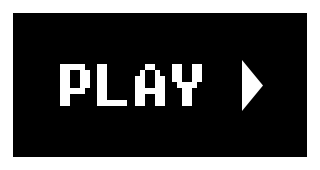
<style>
.page{position:relative;width:320px;height:170px;background:#000000}
.page>*{position:absolute;margin:0}
.t1{font:48px "Super-Mario-World";letter-spacing:0.02em;color:#ffffff;text-transform:uppercase;scale:0.83 1}
</style>
<div class="page">
<p class="t1" style="left:60px;top:64px;width:142px;height:42px">PLAY</p>
</div>
